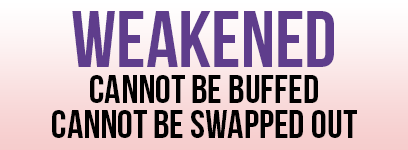
<style>
.page{position:relative;width:408px;height:150px}
.page>*{position:absolute;margin:0}
.t1{font:80px "BebasNeue";color:#5f3d8c}
.t2{font:40px "BebasNeue";color:#000000}
</style>
<div class="page">
<p class="t1" style="left:72px;top:11px;width:262px;height:56px">weakened</p>
<p class="t2" style="left:90px;top:75px;width:228px;height:28px">cannot be buffed</p>
<p class="t2" style="left:52px;top:110px;width:305px;height:28px">cannot be swapped out</p>
</div>
